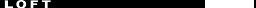
<style>
.page{position:relative;width:256px;height:8px;background:#000000}
.page>*{position:absolute;margin:0}
.t1{font:11px "Arial-Black";letter-spacing:0.18em;color:#ffffff;scale:1.26 1}
</style>
<div class="page">
<p class="t1" style="left:5px;top:0px;width:46px;height:9px">LOFT</p>
</div>
